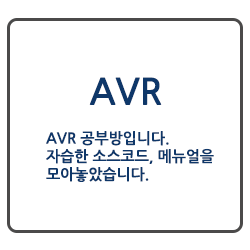
<style>
.page{position:relative;width:250px;height:250px;background:#ffffff}
.page>*{position:absolute;margin:0}
.t1{font:36px "NanumGothicBold";color:#0e3769}
.t2{font:15px "NanumGothicBold";color:#0e3769}
</style>
<div class="page">
<p class="t1" style="left:89px;top:77px;width:73px;height:28px">AVR</p>
<p class="t2" style="left:46px;top:131px;width:168px;height:51px">AVR 공부방입니다.<br>자습한 소스코드, 메뉴얼을<br>모아놓았습니다.</p>
</div>
